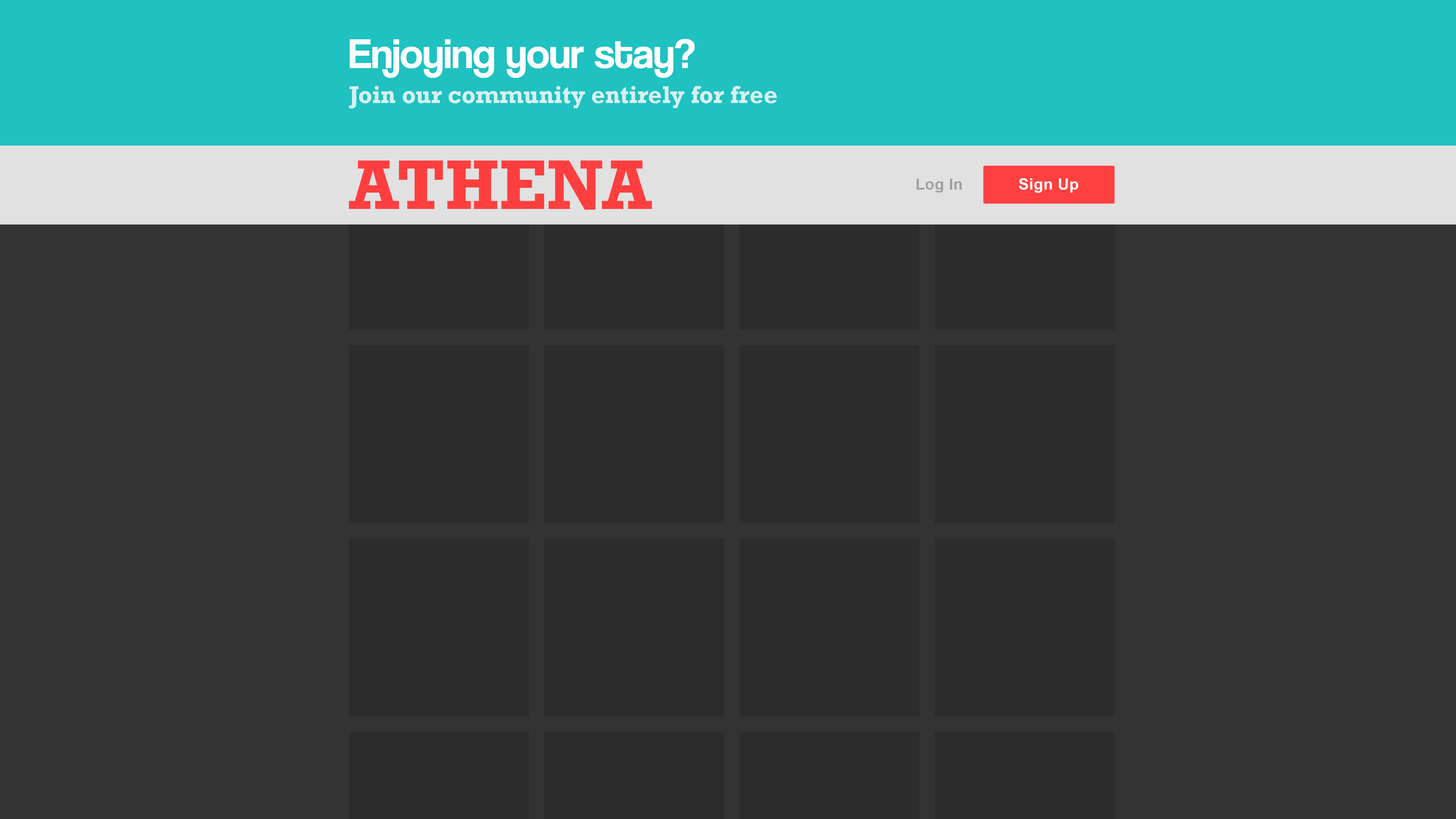
<style>
.page{position:relative;width:1456px;height:819px;background:#333333}
.page>*{position:absolute;margin:0}
.t1{font:42.5px "CoolveticaRg-Regular";color:#ffffff}
.t2{font:24.3px "Rockwell-Bold";color:#d6f0f0}
.t3{font:71.3px "Rockwell-Bold";color:#ff4040}
.t4{font:15.4px "Arial-BoldMT";letter-spacing:0.017em;color:#a0a0a0}
</style>
<div class="page">
<p class="t1" style="left:349px;top:39px;width:346px;height:39px">Enjoying your stay?</p>
<p class="t2" style="left:349px;top:86px;width:428px;height:22px">Join our community entirely for free</p>
<p class="t3" style="left:349px;top:161px;width:303px;height:49px">ATHENA</p>
<p class="t4" style="left:917px;top:179px;width:45px;height:14px">Log In</p>
</div>
